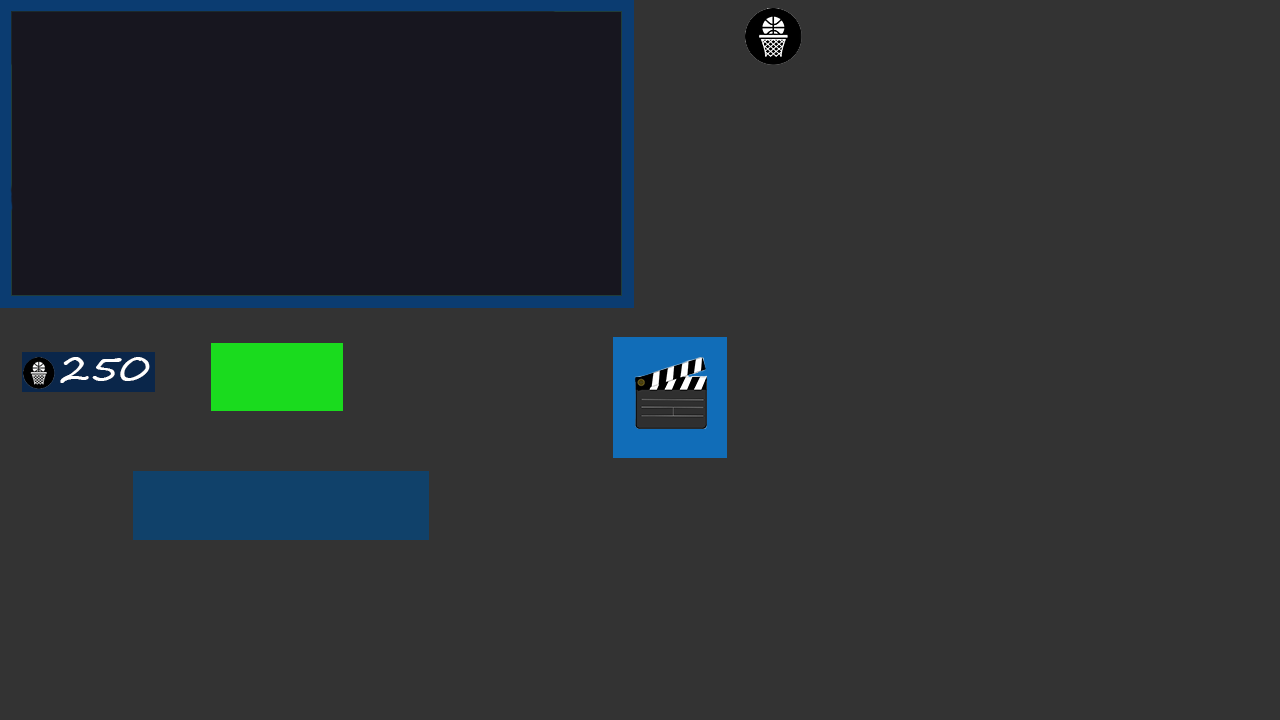
<style>
.page{position:relative;width:1280px;height:720px;background:#333333}
.page>*{position:absolute;margin:0}
.t1{font:36px "SegoeScript";color:#ffffff;scale:1.15 1}
</style>
<div class="page">
<p class="t1" style="left:60px;top:357px;width:90px;height:26px">250</p>
</div>
